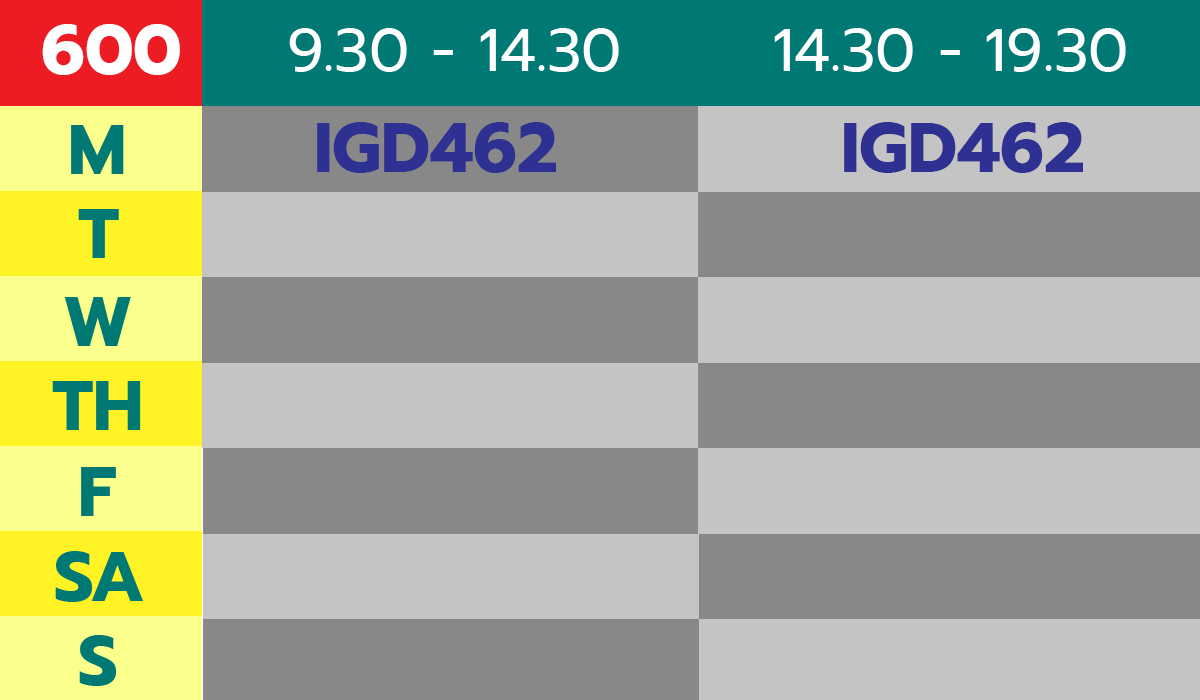
<style>
.page{position:relative;width:1200px;height:700px;background:#c4c4c4}
.page>*{position:absolute;margin:0}
.t1{font:70px "Prompt-Bold";color:#ffffff}
.t2{font:60px "Prompt-Regular";color:#ffffff}
.t3{font:70px "Prompt-Bold";color:#007873}
.t4{font:70px "Prompt-Bold";color:#2e3192}
</style>
<div class="page">
<p class="t1" style="left:42px;top:24px;width:138px;height:51px">600</p>
<p class="t2" style="left:289px;top:28px;width:330px;height:44px">9.30 - 14.30</p>
<p class="t2" style="left:774px;top:28px;width:352px;height:44px">14.30 - 19.30</p>
<p class="t3" style="left:71px;top:125px;width:53px;height:49px">M</p>
<p class="t4" style="left:317px;top:122px;width:239px;height:51px">IGD462</p>
<p class="t4" style="left:844px;top:122px;width:239px;height:51px">IGD462</p>
<p class="t3" style="left:78px;top:209px;width:41px;height:49px">T</p>
<p class="t3" style="left:64px;top:297px;width:67px;height:49px">W</p>
<p class="t3" style="left:52px;top:381px;width:89px;height:49px">TH</p>
<p class="t3" style="left:81px;top:467px;width:35px;height:49px">F</p>
<p class="t3" style="left:55px;top:551px;width:89px;height:51px">SA</p>
<p class="t3" style="left:79px;top:635px;width:38px;height:51px">S</p>
</div>
